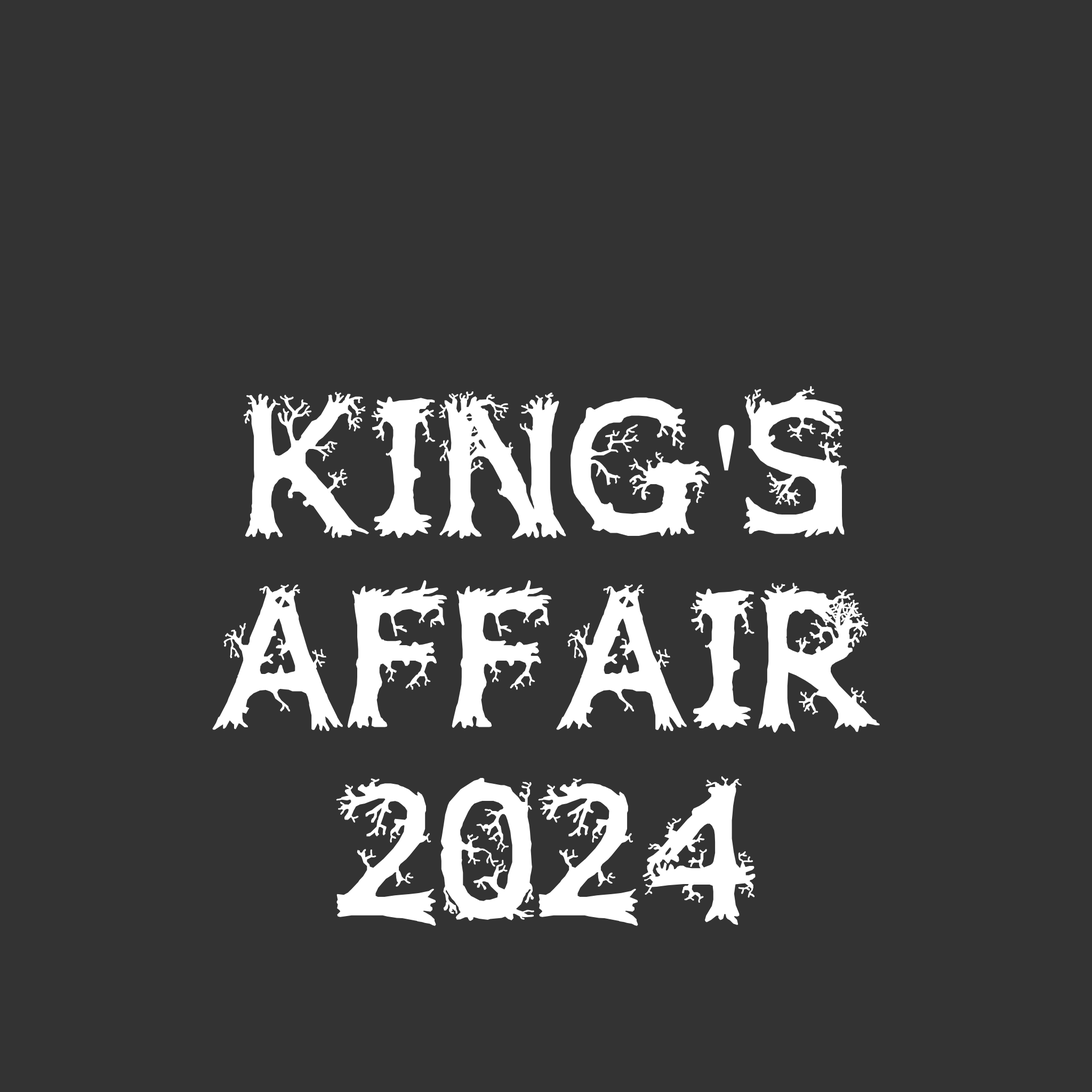
<style>
.page{position:relative;width:1092px;height:1092px;background:#333333}
.page>*{position:absolute;margin:0}
.t1{font:160px "JFWildWood";color:#ffffff}
.t2{font:160px "TimesNewRomanPSMT";color:#ffffff}
</style>
<div class="page">
<p class="t1" style="left:212px;top:386px;width:668px;height:540px;text-align:center">King<span class="t2">'</span>s<br>Affair<br>2024</p>
</div>
